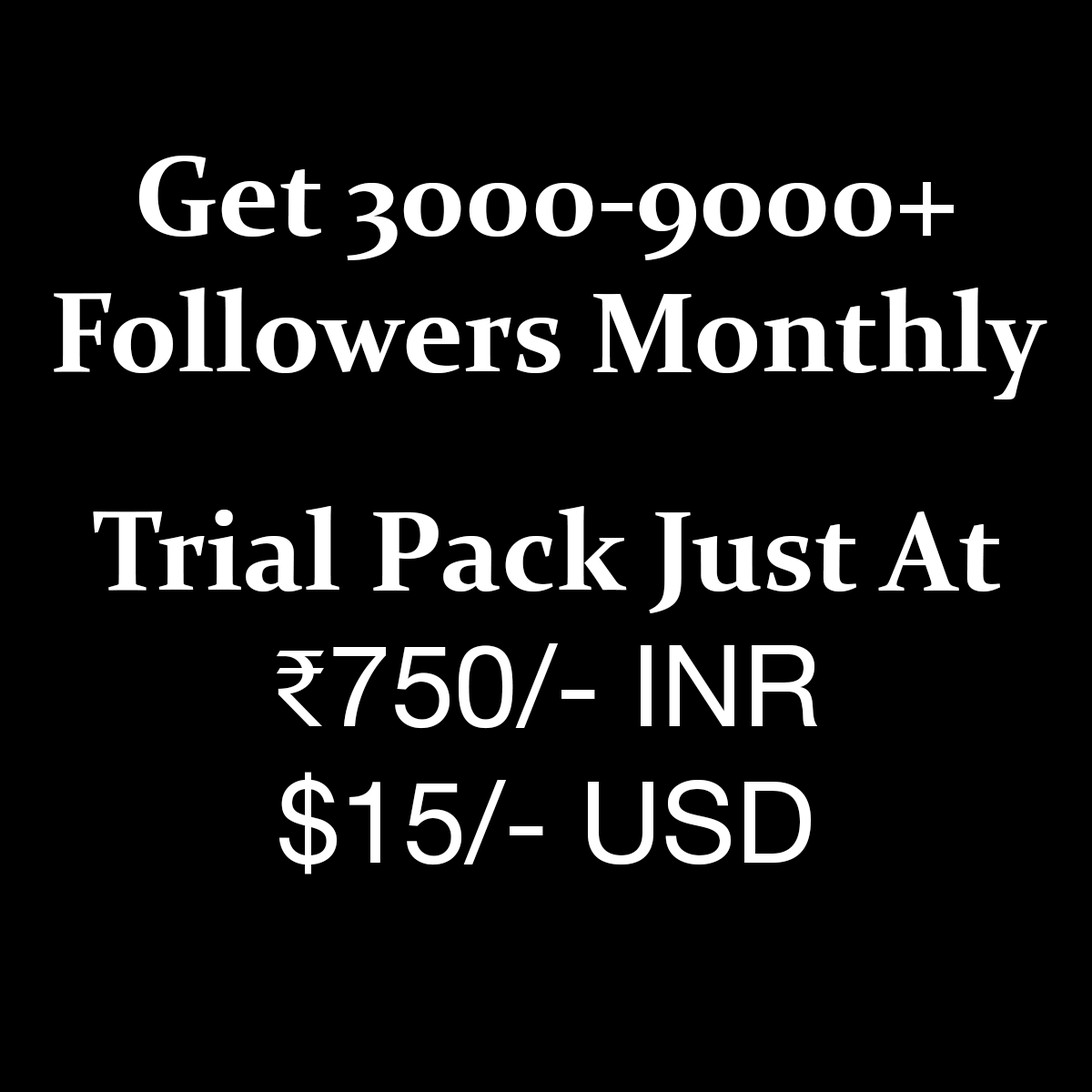
<style>
.page{position:relative;width:1092px;height:1092px;background:#000000}
.page>*{position:absolute;margin:0}
.t1{font:113.7px/13.6px "Constantia-Bold";color:#ffffff}
.t2{font:113.7px/13.6px "TimesNewRomanPSMT";color:#ffffff}
.t3{font:113.7px/13.6px "HelveticaNeueLTStd-Roman";color:#ffffff}
</style>
<div class="page">
<p class="t1" style="left:54px;top:156px;width:993px;height:718px;text-align:center">Get 3000-9000+<br><br><br><br><br><br><br><br><br><br>Followers Monthly<br><br><br><br><br><br><br><br><br><br><br><br><br><br><br><br>Trial Pack Just At<br><span class="t2"><br><br><br><br><br><br><br><br><br>₹</span><span class="t3">750/- INR<br><br><br><br><br><br><br><br><br><br>$15/- USD</span></p>
</div>
